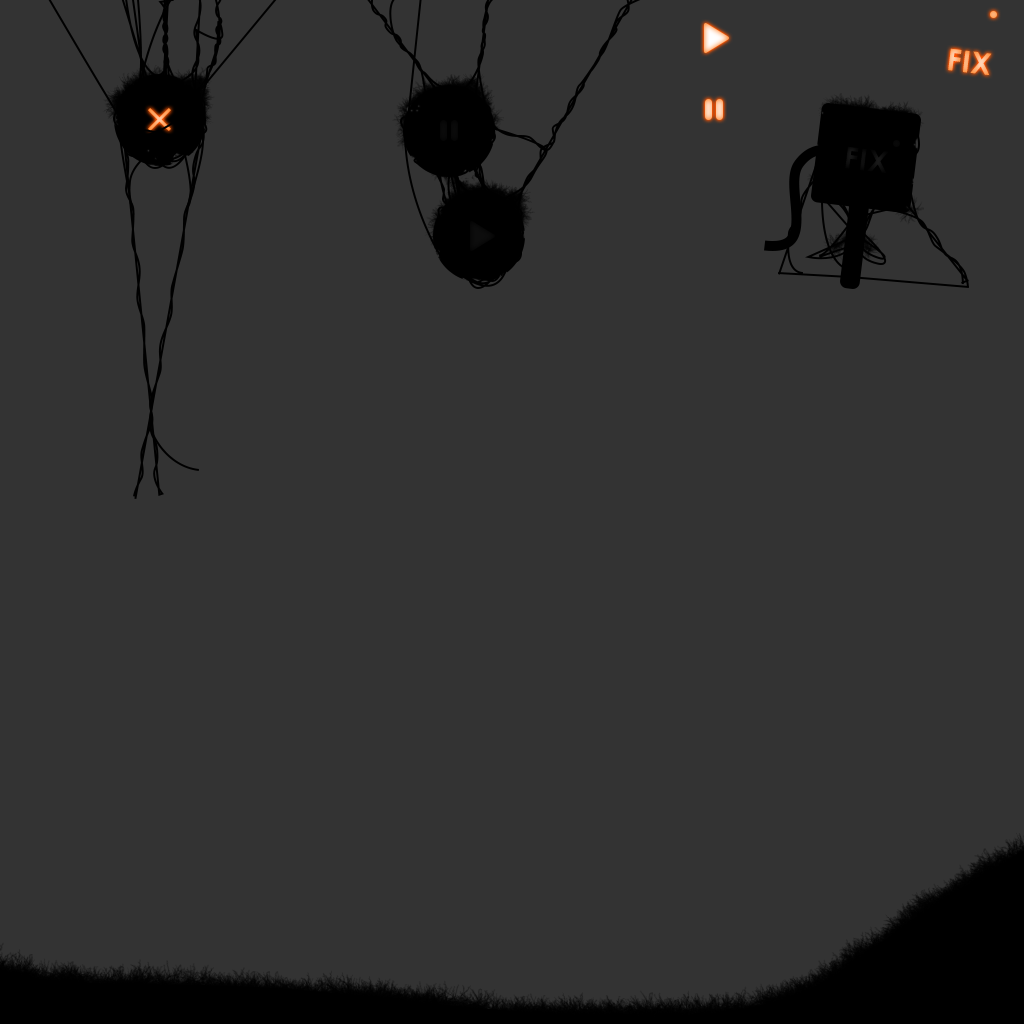
<style>
.page{position:relative;width:1024px;height:1024px;background:#333333}
.page>*{position:absolute;margin:0}
.t1{font:30px "CenturyGothic-Bold";letter-spacing:0.025em}
.t2{font:30px "CenturyGothic-Bold";letter-spacing:0.025em;color:#0e0e0e}
</style>
<div class="page">
<p class="t1" style="left:948px;top:48px;width:44px;height:28px;rotate:7deg">FIX</p>
<p class="t2" style="left:845px;top:146px;width:44px;height:28px;rotate:7deg">FIX</p>
</div>
